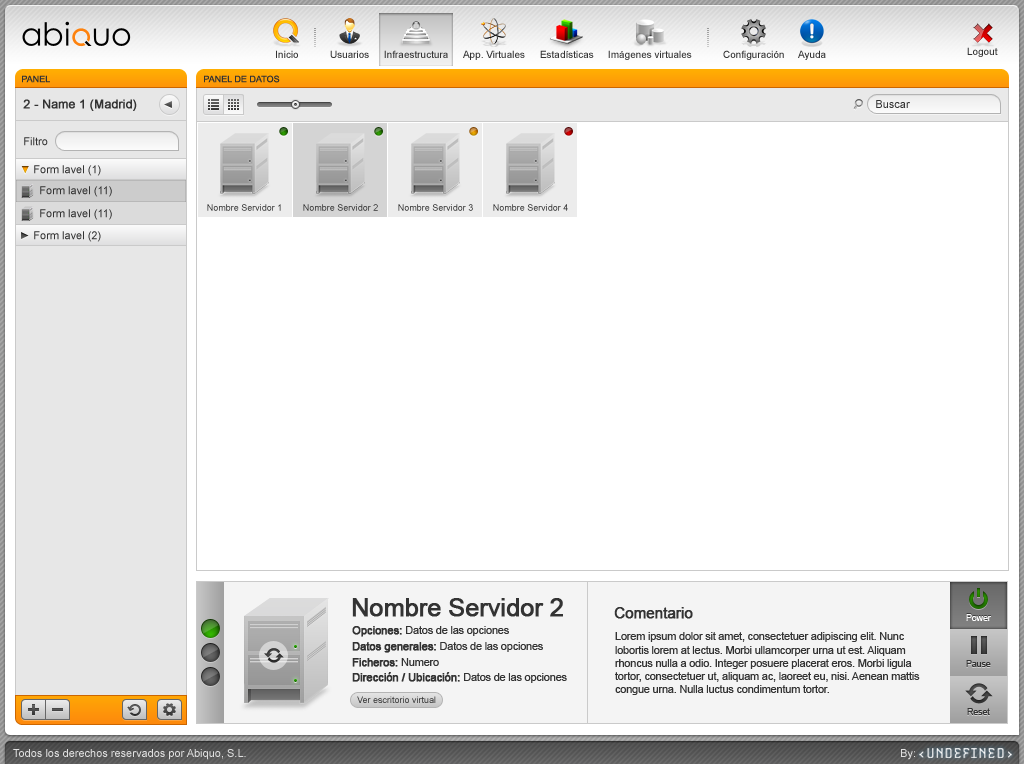
<style>
.page{position:relative;width:1024px;height:764px;background:#ffffff}
.page>*{position:absolute;margin:0}
.t1{font:10px "ArialMT";color:#333333}
.t2{font:9px "ArialMT";color:#333333}
.t3{font:12px "ArialMT";color:#333333;font-weight:bold}
.t4{font:11px "ArialMT";color:#333333}
.t5{font:25px "ArialMT";letter-spacing:-0.02em;color:#333333;font-weight:bold}
.t6{font:15px "ArialMT";letter-spacing:-0.02em;color:#333333;font-weight:bold}
.t7{font:9px "ArialMT";letter-spacing:-0.02em;color:#ffffff}
.t8{font:11px "ArialMT";letter-spacing:-0.02em;color:#333333}
.t9{font:11px "ArialMT";letter-spacing:-0.02em;color:#333333;font-weight:bold}
.t10{font:9px "ArialMT";letter-spacing:-0.02em;color:#333333}
.t11{font:11px "ArialMT";color:#e0e0e0}
</style>
<div class="page">
<p class="t1" style="left:276px;top:50px;width:22px;height:8px">Inicio</p>
<p class="t1" style="left:330px;top:50px;width:39px;height:8px">Usuarios</p>
<p class="t1" style="left:384px;top:50px;width:64px;height:8px">Infraestructura</p>
<p class="t1" style="left:463px;top:50px;width:62px;height:10px">App. Virtuales</p>
<p class="t1" style="left:540px;top:50px;width:54px;height:8px">Estadísticas</p>
<p class="t1" style="left:608px;top:50px;width:84px;height:10px">Imágenes virtuales</p>
<p class="t1" style="left:723px;top:50px;width:61px;height:10px">Configuración</p>
<p class="t1" style="left:798px;top:50px;width:28px;height:10px">Ayuda</p>
<p class="t1" style="left:967px;top:47px;width:31px;height:10px">Logout</p>
<p class="t2" style="left:22px;top:75px;width:28px;height:8px">PANEL</p>
<p class="t2" style="left:204px;top:75px;width:76px;height:8px">PANEL DE DATOS</p>
<p class="t3" style="left:23px;top:99px;width:114px;height:12px">2 - Name 1 (Madrid)</p>
<p class="t4" style="left:876px;top:100px;width:34px;height:8px">Buscar</p>
<p class="t4" style="left:24px;top:137px;width:24px;height:9px">Filtro</p>
<p class="t4" style="left:34px;top:165px;width:67px;height:11px">Form lavel (1)</p>
<p class="t4" style="left:40px;top:186px;width:72px;height:11px">Form lavel (11)</p>
<p class="t4" style="left:40px;top:209px;width:72px;height:11px">Form lavel (11)</p>
<p class="t2" style="left:207px;top:204px;width:74px;height:7px">Nombre Servidor 1</p>
<p class="t2" style="left:303px;top:204px;width:75px;height:7px">Nombre Servidor 2</p>
<p class="t2" style="left:398px;top:204px;width:75px;height:7px">Nombre Servidor 3</p>
<p class="t2" style="left:493px;top:204px;width:75px;height:7px">Nombre Servidor 4</p>
<p class="t4" style="left:34px;top:231px;width:67px;height:11px">Form lavel (2)</p>
<p class="t5" style="left:352px;top:598px;width:211px;height:19px">Nombre Servidor 2</p>
<p class="t6" style="left:614px;top:607px;width:79px;height:12px">Comentario</p>
<p class="t7" style="left:966px;top:614px;width:25px;height:7px">Power</p>
<p class="t8" style="left:352px;top:626px;width:157px;height:11px"><span class="t9">Opciones: </span>Datos de las opciones</p>
<p class="t8" style="left:615px;top:632px;width:305px;height:63px">Lorem ipsum dolor sit amet, consectetuer adipiscing elit. Nunc lobortis lorem at lectus. Morbi ullamcorper urna ut est. Aliquam rhoncus nulla a odio. Integer posuere placerat eros. Morbi ligula tortor, consectetuer ut, aliquam ac, laoreet eu, nisi. Aenean mattis congue urna. Nulla luctus condimentum tortor.</p>
<p class="t8" style="left:352px;top:642px;width:191px;height:11px"><span class="t9">Datos generales: </span>Datos de las opciones</p>
<p class="t9" style="left:352px;top:658px;width:87px;height:9px">Ficheros: <span class="t8">Numero</span></p>
<p class="t10" style="left:966px;top:660px;width:25px;height:7px">Pause</p>
<p class="t9" style="left:352px;top:672px;width:215px;height:11px">Dirección / Ubicación: <span class="t8">Datos de las opciones</span></p>
<p class="t2" style="left:357px;top:696px;width:79px;height:7px">Ver escritorio virtual</p>
<p class="t10" style="left:967px;top:708px;width:23px;height:7px">Reset</p>
<p class="t11" style="left:13px;top:749px;width:233px;height:11px">Todos los derechos reservados por Abiquo, S.L.</p>
<p class="t11" style="left:901px;top:749px;width:14px;height:11px">By:</p>
</div>
